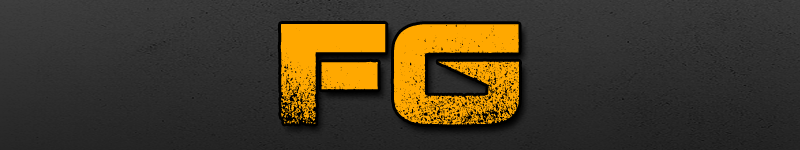
<style>
.page{position:relative;width:800px;height:150px}
.page>*{position:absolute;margin:0}
.t1{font:140px "Coalition";letter-spacing:0.025em;color:#ffa800}
</style>
<div class="page">
<p class="t1" style="left:280px;top:24px;width:239px;height:101px">FG</p>
</div>
